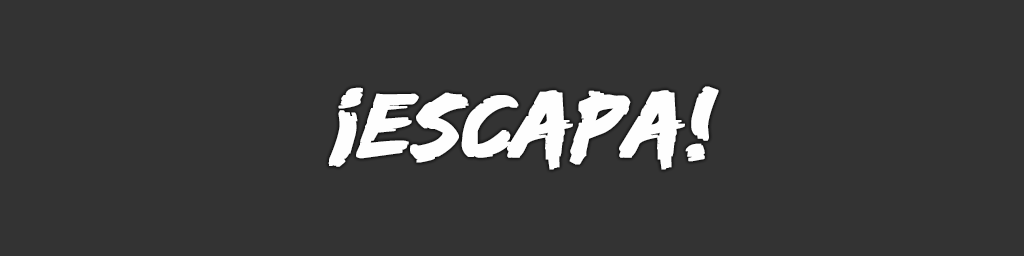
<style>
.page{position:relative;width:1024px;height:256px;background:#333333}
.page>*{position:absolute;margin:0}
.t1{font:94px "EdoSZ";color:#fefefe;font-weight:bold;font-style:italic;scale:1.04 1}
</style>
<div class="page">
<p class="t1" style="left:328px;top:86px;width:391px;height:84px">¡Escapa!</p>
</div>
